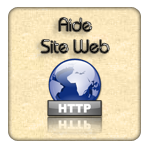
<style>
.page{position:relative;width:150px;height:150px;background:#ffffff}
.page>*{position:absolute;margin:0}
.t1{font:18px "BauhausITCbyBT-Light"}
</style>
<div class="page">
<p class="t1" style="left:41px;top:18px;width:68px;height:35px;text-align:center">Aide<br>Site Web</p>
</div>
